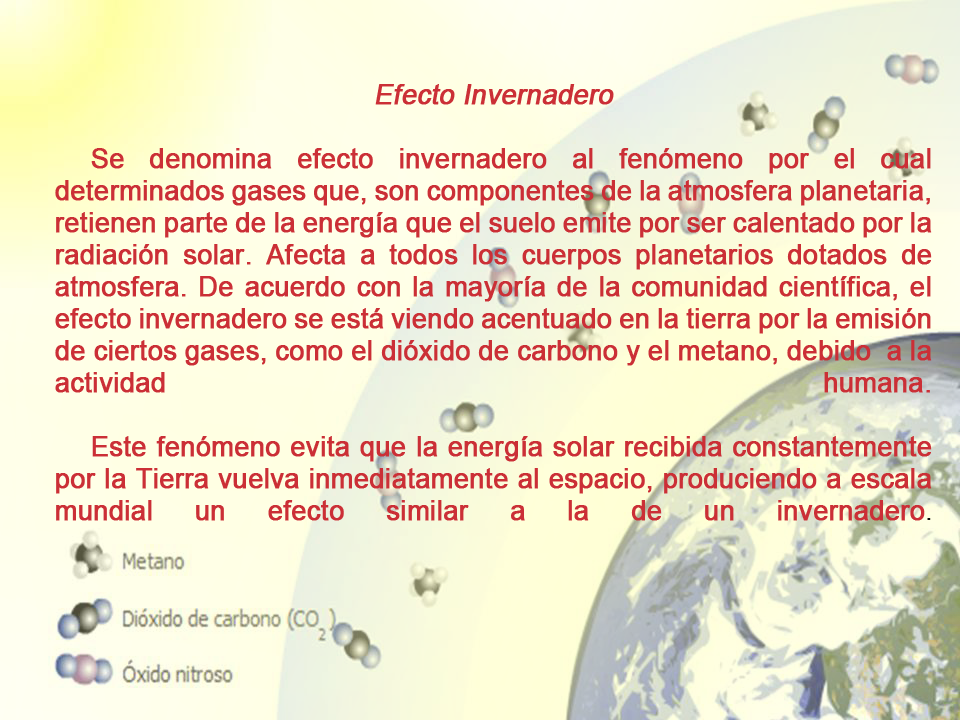
<style>
.page{position:relative;width:960px;height:720px}
.page>*{position:absolute;margin:0}
.t1{font:26.7px "ArialMT";color:#cb2f36;font-weight:bold}
.t2{font:26.7px "ArialMT";color:#cb2f36;font-weight:bold;font-style:italic}
.t3{font:24px "ArialMT";color:#0d0b0c}
</style>
<div class="page">
<p class="t1" style="left:55px;top:84px;width:877px;height:437px;text-align:center"><span class="t2">Efecto Invernadero<br><br></span> Se denomina efecto invernadero al fenómeno por el cual determinados gases que, son componentes de la atmosfera planetaria, retienen parte de la energía que el suelo emite por ser calentado por la radiación solar. Afecta a todos los cuerpos planetarios dotados de atmosfera. De acuerdo con la mayoría de la comunidad científica, el efecto invernadero se está viendo acentuado en la tierra por la emisión de ciertos gases, como el dióxido de carbono y el metano, debido  a la actividad humana.<br><br> Este fenómeno evita que la energía solar recibida constantemente por la Tierra vuelva inmediatamente al espacio, produciendo a escala mundial un efecto similar a la de un invernadero<span class="t3">.</span></p>
</div>
